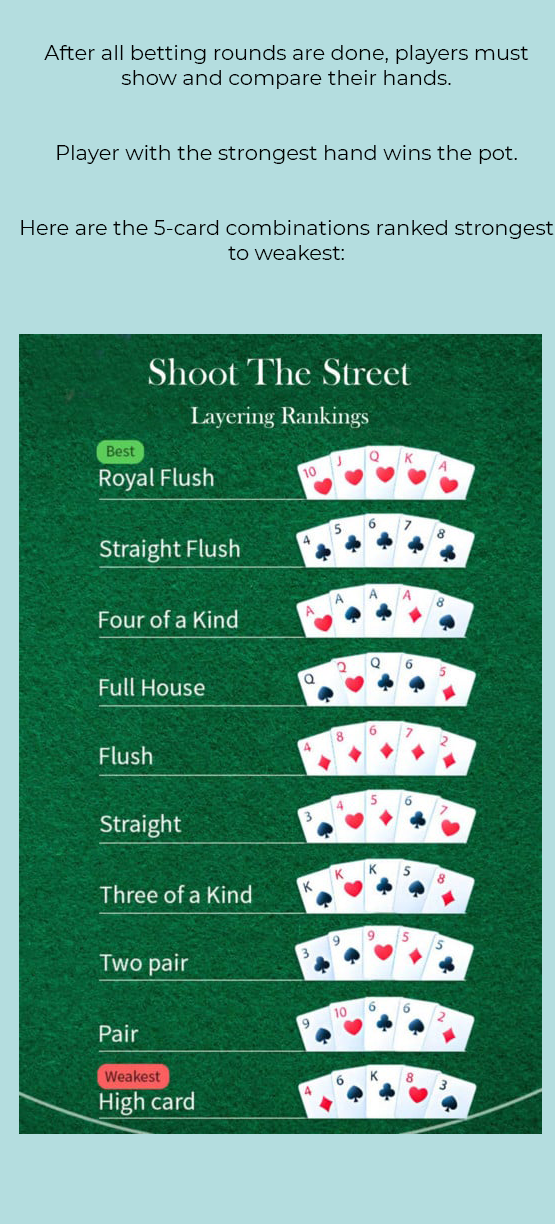
<style>
.page{position:relative;width:555px;height:1224px;background:#b4dddf}
.page>*{position:absolute;margin:0}
.t1{font:20.8px "Montserrat-Regular";color:#000000}
</style>
<div class="page">
<p class="t1" style="left:21px;top:45px;width:533px;height:215px;text-align:center">After all betting rounds are done, players must show and compare their hands.<br><br><br>Player with the strongest hand wins the pot.<br><br><br>Here are the 5-card combinations ranked strongest to weakest:</p>
</div>
